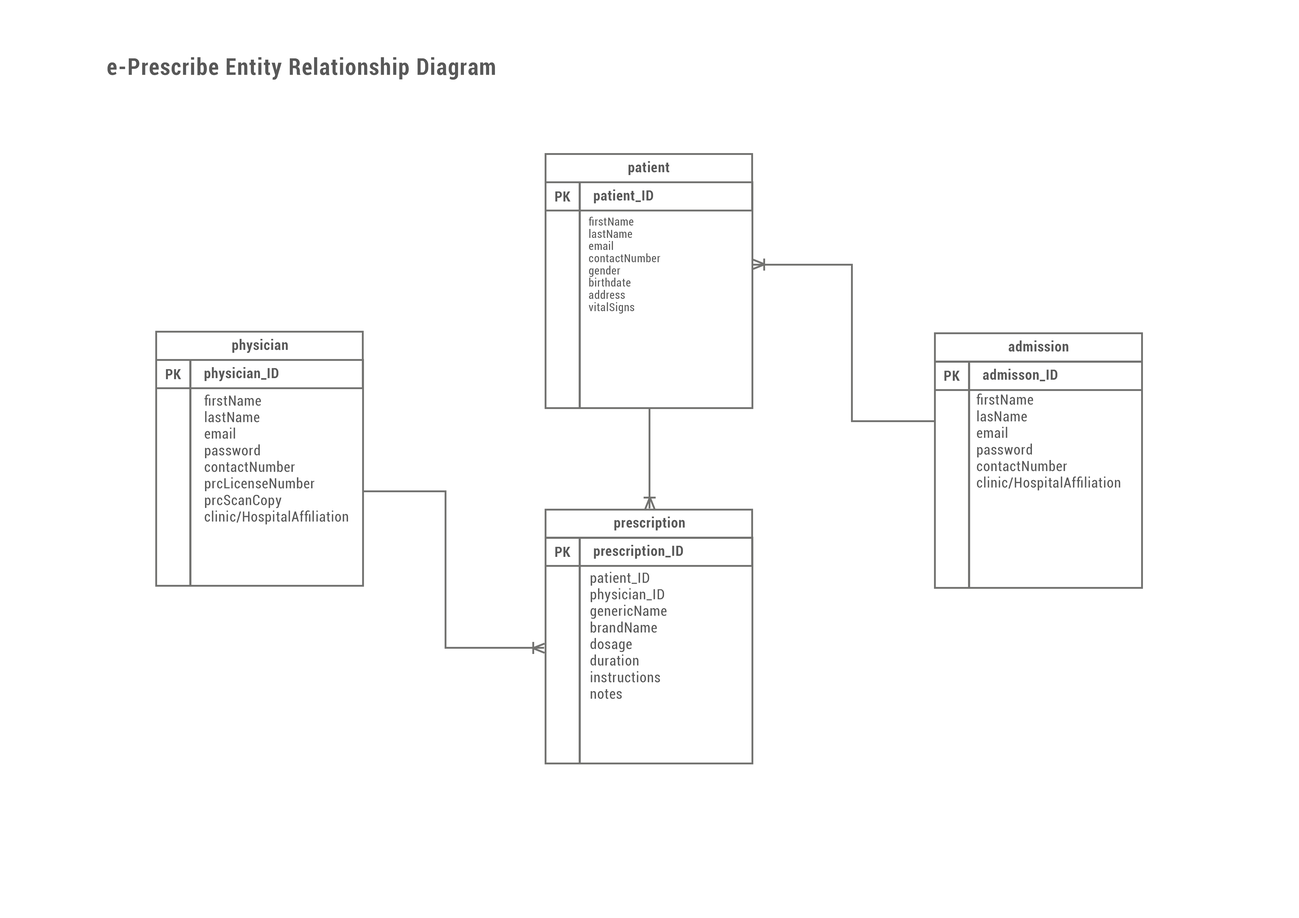
<style>
.page{position:relative;width:1299px;height:918px;background:#ffffff}
.page>*{position:absolute;margin:0}
.t1{font:23.2px "Roboto-BoldCondensed";letter-spacing:0.04em;color:#585858}
.t2{font:14.2px "Roboto-BoldCondensed";letter-spacing:0.04em;color:#585858}
.t3{font:11.2px/12.2px "Roboto-Condensed";letter-spacing:0.04em;color:#585858}
.t4{font:14.3px "Roboto-BoldCondensed";letter-spacing:0.04em;color:#585858}
.t5{font:14.2px/16.6px "Roboto-Condensed";letter-spacing:0.04em;color:#585858}
.t6{font:14.3px/16.6px "Roboto-Condensed";letter-spacing:0.04em;color:#585858}
</style>
<div class="page">
<p class="t1" style="left:107px;top:57px;width:388px;height:23px">e-Prescribe Entity Relationship Diagram</p>
<p class="t2" style="left:628px;top:161px;width:41px;height:14px">patient</p>
<p class="t2" style="left:555px;top:191px;width:15px;height:11px">PK</p>
<p class="t2" style="left:594px;top:190px;width:59px;height:13px">patient_ID</p>
<p class="t3" style="left:588px;top:217px;width:72px;height:97px;text-align:justify">firstName<br>lastName<br>email<br>contactNumber<br>gender<br>birthdate<br>address<br>vitalSigns</p>
<p class="t2" style="left:232px;top:339px;width:56px;height:14px">physician</p>
<p class="t4" style="left:1008px;top:341px;width:60px;height:11px">admission</p>
<p class="t2" style="left:166px;top:369px;width:15px;height:10px">PK</p>
<p class="t2" style="left:204px;top:367px;width:75px;height:14px">physician_ID</p>
<p class="t4" style="left:944px;top:371px;width:16px;height:10px">PK</p>
<p class="t4" style="left:983px;top:369px;width:74px;height:12px">admisson_ID</p>
<p class="t5" style="left:204px;top:394px;width:144px;height:131px;text-align:justify">firstName<br>lastName<br>email<br>password<br>contactNumber<br>prcLicenseNumber<br>prcScanCopy<br>clinic/HospitalAffiliation</p>
<p class="t6" style="left:976px;top:393px;width:144px;height:98px;text-align:justify">firstName<br>lasName<br>email<br>password<br>contactNumber<br>clinic/HospitalAffiliation</p>
<p class="t2" style="left:614px;top:517px;width:71px;height:14px">prescription</p>
<p class="t2" style="left:594px;top:545px;width:89px;height:14px">prescription_ID</p>
<p class="t2" style="left:555px;top:547px;width:15px;height:10px">PK</p>
<p class="t5" style="left:590px;top:572px;width:76px;height:127px;text-align:justify">patient_ID<br>physician_ID<br>genericName<br>brandName<br>dosage<br>duration<br>instructions<br>notes</p>
</div>
